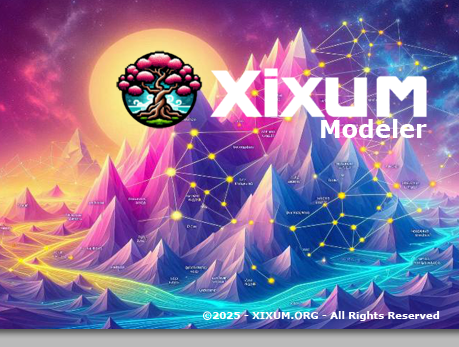
<style>
.page{position:relative;width:459px;height:347px}
.page>*{position:absolute;margin:0}
.t1{font:24px "Verdana-Bold";color:#ffffff}
.t2{font:10px "Verdana-Bold";color:#ffffff}
</style>
<div class="page">
<p class="t1" style="left:321px;top:119px;width:106px;height:19px">Modeler</p>
<p class="t2" style="left:202px;top:311px;width:238px;height:10px">©2025 - XIXUM.ORG - All Rights Reserved</p>
</div>
